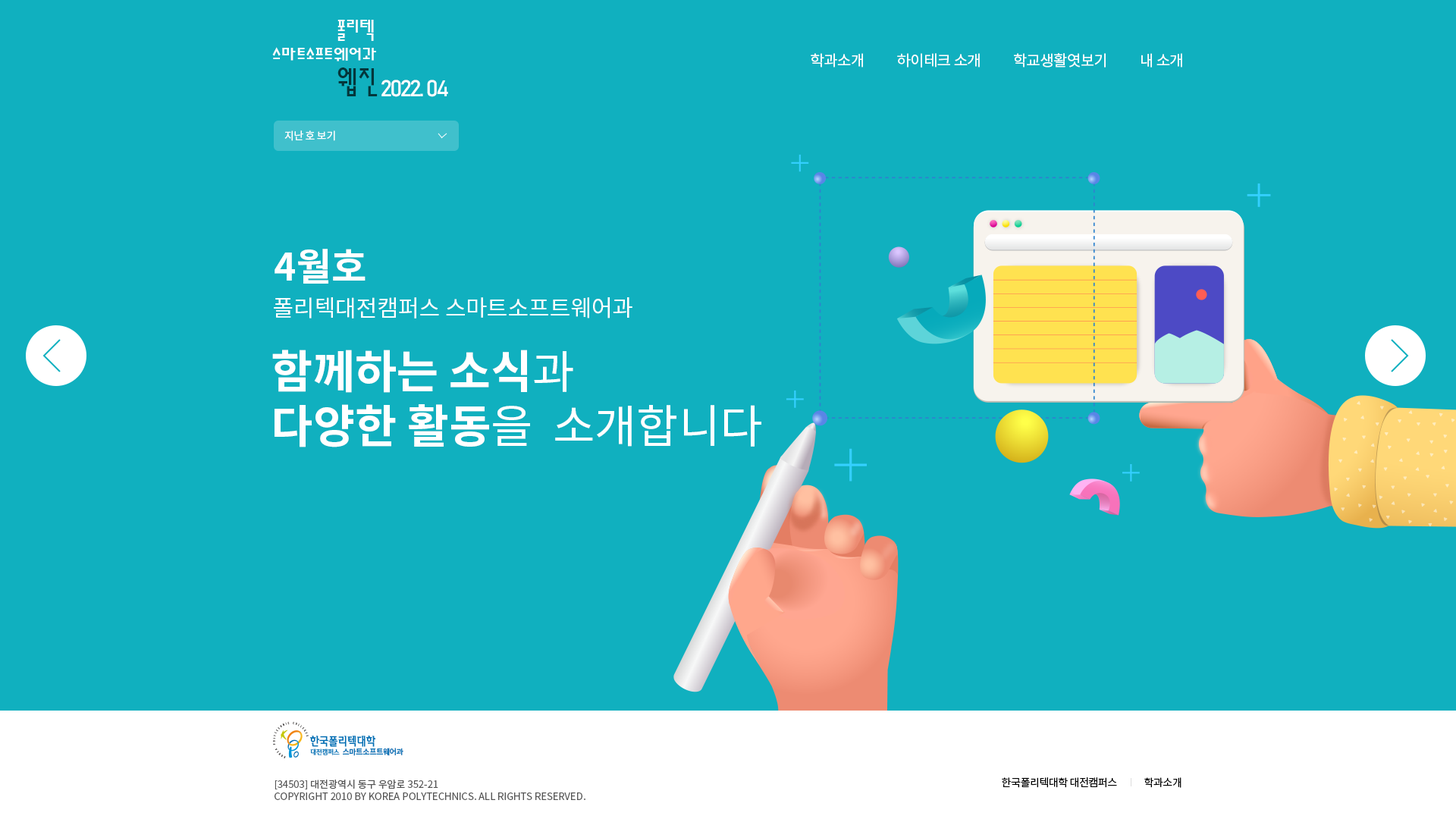
<style>
.page{position:relative;width:1456px;height:819px;background:#10b0bf}
.page>*{position:absolute;margin:0}
.t1{font:22.7px "H2sa1M";letter-spacing:-0.01em;color:#ffffff}
.t2{font:15.2px "NotoSansCJKkr-Regular";letter-spacing:-0.03em;color:#ffffff}
.t3{font:30.3px "H2sa1M";letter-spacing:-0.01em;color:#04363b}
.t4{font:22.7px "Bahnschrift";letter-spacing:-0.1em;color:#ffffff}
.t5{font:10.6px "NotoSansCJKkr-Regular";letter-spacing:-0.03em;color:#ffffff}
.t6{font:37.9px "NotoSansCJKkr-Bold";color:#ffffff}
.t7{font:22.7px "NotoSansCJKkr-Regular";color:#ffffff}
.t8{font:45.5px "NotoSansCJKkr-Regular";color:#ffffff}
.t9{font:45.5px "NotoSansCJKkr-Bold";color:#ffffff}
.t10{font:7.6px "NotoSansCJKkr-Bold";letter-spacing:-0.03em;color:#0f75b7}
.t11{font:9.9px "NotoSansCJKkr-Regular";color:#555555}
.t12{font:10.6px "NotoSansCJKkr-Regular";letter-spacing:-0.03em;color:#000000}
</style>
<div class="page">
<p class="t1" style="left:337px;top:20px;width:37px;height:21px">폴리텍</p>
<p class="t1" style="left:272px;top:47px;width:104px;height:14px">스마트소프트웨어과</p>
<p class="t2" style="left:811px;top:53px;width:371px;height:14px">학과소개           하이테크 소개           학교생활엿보기           내 소개</p>
<p class="t3" style="left:337px;top:67px;width:41px;height:29px">웹진</p>
<p class="t4" style="left:381px;top:80px;width:67px;height:17px">2022. 04</p>
<p class="t5" style="left:284px;top:130px;width:51px;height:11px">지난 호 보기</p>
<p class="t6" style="left:275px;top:249px;width:91px;height:35px">4월호</p>
<p class="t7" style="left:274px;top:297px;width:358px;height:21px">폴리텍대전캠퍼스 스마트소프트웨어과</p>
<p class="t8" style="left:272px;top:350px;width:489px;height:97px"><span class="t9">함께하는 소식</span>과 <br><span class="t9">다양한 활동</span>을  소개합니다</p>
<p class="t10" style="left:343px;top:748px;width:60px;height:8px">스마트소프트웨어과</p>
<p class="t11" style="left:275px;top:780px;width:310px;height:20px">[34503] 대전광역시 동구 우암로 352-21        <br>COPYRIGHT 2010 BY KOREA POLYTECHNICS. ALL RIGHTS RESERVED.</p>
<p class="t12" style="left:1002px;top:777px;width:115px;height:11px">한국폴리텍대학 대전캠퍼스</p>
<p class="t12" style="left:1144px;top:777px;width:37px;height:11px">학과소개</p>
</div>
